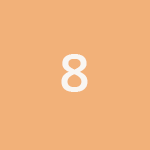
<style>
.page{position:relative;width:150px;height:150px;background:#f2b179}
.page>*{position:absolute;margin:0}
.t1{font:52.9px "ClearSans-Medium";color:#f9f6f2}
</style>
<div class="page">
<p class="t1" style="left:61px;top:54px;width:27px;height:38px">8</p>
</div>
